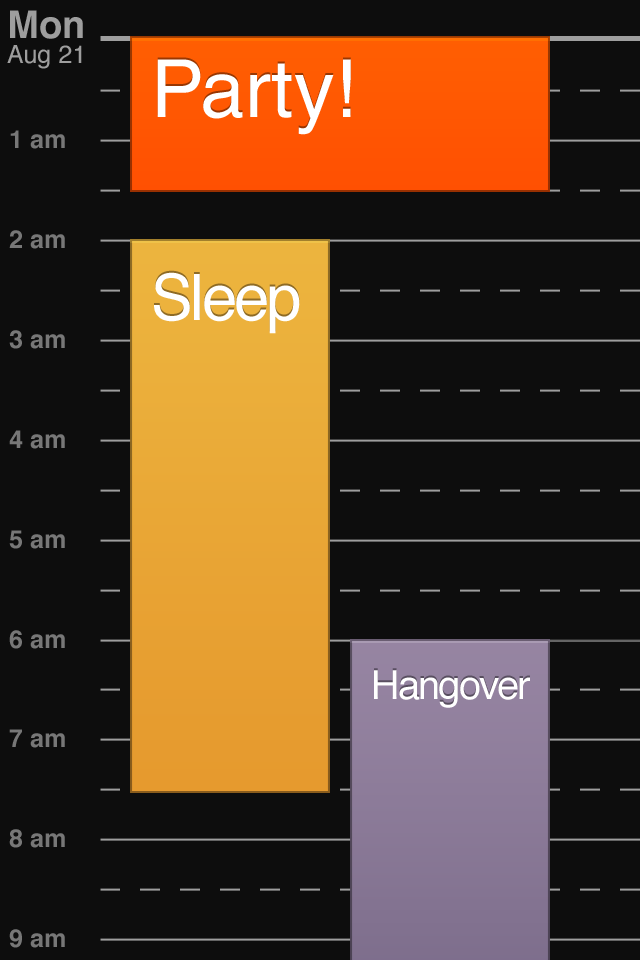
<style>
.page{position:relative;width:640px;height:960px;background:#0d0d0d}
.page>*{position:absolute;margin:0}
.t1{font:25px/25px "Helvetica";color:#9e9e9e}
.t2{font:38px/25px "Helvetica-Bold";color:#9e9e9e}
.t3{font:80px "Helvetica";color:#ffffff}
.t4{font:80px "Helvetica";letter-spacing:-0.05em;color:#ffffff}
.t5{font:25px "Helvetica-Bold";color:#777777}
.t6{font:64px "Helvetica";letter-spacing:-0.05em;color:#ffffff}
.t7{font:40px "Helvetica";letter-spacing:-0.05em}
.t8{font:40px "Helvetica";letter-spacing:-0.05em;color:#ffffff}
</style>
<div class="page">
<p class="t1" style="left:7px;top:10px;width:76px;height:59px"><span class="t2">Mon<br></span>Aug 21</p>
<p class="t3" style="left:157px;top:57px;width:194px;height:76px"><span class="t4">P</span>arty!</p>
<p class="t3" style="left:157px;top:59px;width:194px;height:76px"><span class="t4">P</span>arty!</p>
<p class="t5" style="left:10px;top:130px;width:55px;height:19px">1 am</p>
<p class="t5" style="left:9px;top:230px;width:56px;height:19px">2 am</p>
<p class="t6" style="left:154px;top:270px;width:146px;height:62px">Sleep</p>
<p class="t6" style="left:154px;top:272px;width:146px;height:62px">Sleep</p>
<p class="t5" style="left:9px;top:330px;width:56px;height:19px">3 am</p>
<p class="t5" style="left:9px;top:430px;width:56px;height:19px">4 am</p>
<p class="t5" style="left:9px;top:530px;width:56px;height:19px">5 am</p>
<p class="t5" style="left:9px;top:630px;width:56px;height:19px">6 am</p>
<p class="t7" style="left:374px;top:668px;width:156px;height:38px">Hangover</p>
<p class="t8" style="left:374px;top:670px;width:156px;height:38px">Hangover</p>
<p class="t5" style="left:9px;top:729px;width:56px;height:19px">7 am</p>
<p class="t5" style="left:9px;top:829px;width:56px;height:19px">8 am</p>
<p class="t5" style="left:9px;top:929px;width:56px;height:19px">9 am</p>
</div>
